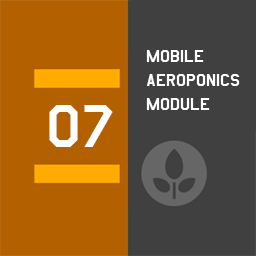
<style>
.page{position:relative;width:256px;height:256px;background:#404040}
.page>*{position:absolute;margin:0}
.t1{font:20px "AmarilloUSAF";color:#ffffff}
.t2{font:70px "AmarilloUSAF";color:#ffffff}
</style>
<div class="page">
<p class="t1" style="left:146px;top:50px;width:94px;height:60px">mobile<br>aeroponics<br>module</p>
<p class="t2" style="left:49px;top:105px;width:64px;height:42px">07</p>
</div>
